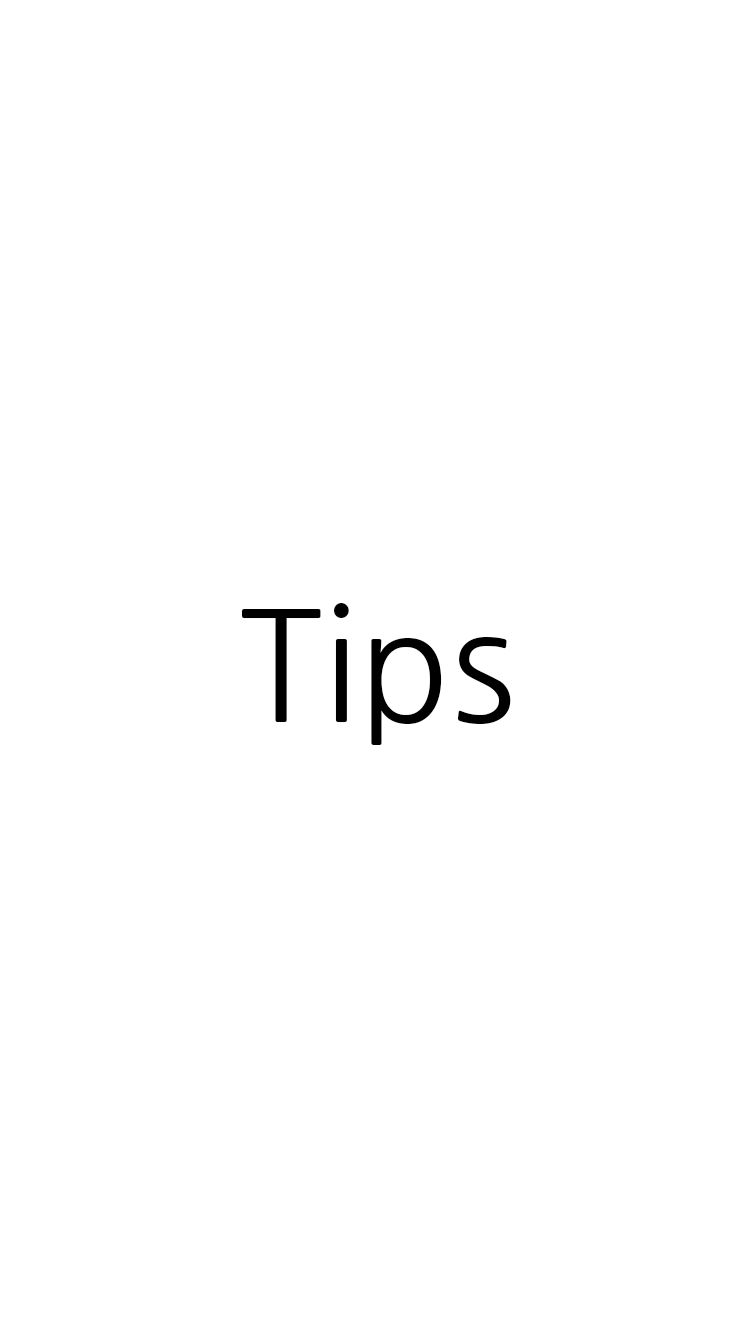
<style>
.page{position:relative;width:750px;height:1334px;background:#ffffff}
.page>*{position:absolute;margin:0}
.t1{font:151.8px "NanumGothic";color:#000000}
</style>
<div class="page">
<p class="t1" style="left:242px;top:603px;width:269px;height:142px">Tips</p>
</div>
